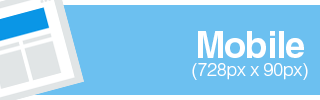
<style>
.page{position:relative;width:320px;height:100px;background:#6cc0f0}
.page>*{position:absolute;margin:0}
.t1{font:18px/18px "Helvetica-Light";letter-spacing:-0.02em;color:#ffffff}
.t2{font:36px/18px "Helvetica-Bold";letter-spacing:-0.02em;color:#ffffff}
</style>
<div class="page">
<p class="t1" style="left:192px;top:31px;width:116px;height:49px;text-align:center"><span class="t2">Mobile<br></span>(728px x 90px)</p>
</div>
